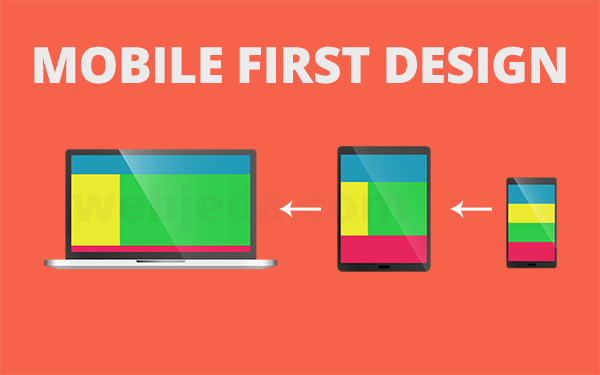
<style>
.page{position:relative;width:600px;height:375px;background:#f6634a}
.page>*{position:absolute;margin:0}
.t1{font:50px "OpenSans-Extrabold";letter-spacing:-0.01em;color:#ebebeb}
</style>
<div class="page">
<p class="t1" style="left:34px;top:46px;width:532px;height:38px">MOBILE FIRST DESIGN</p>
</div>
